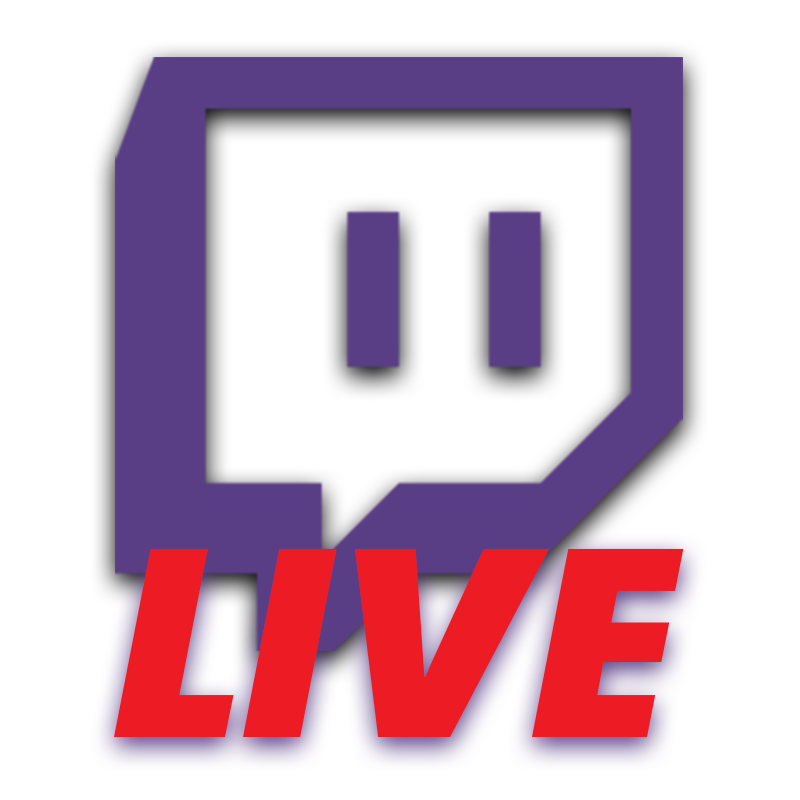
<style>
.page{position:relative;width:800px;height:800px;background:#ffffff}
.page>*{position:absolute;margin:0}
.t1{font:293.1px "FenomenSans-BoldItalic";color:#ed1c24}
</style>
<div class="page">
<p class="t1" style="left:114px;top:548px;width:570px;height:190px">LIVE</p>
</div>
